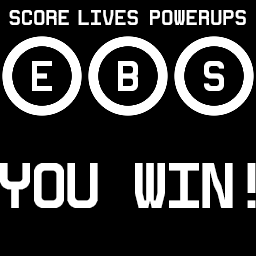
<style>
.page{position:relative;width:256px;height:256px;background:#000000}
.page>*{position:absolute;margin:0}
.t1{font:10px "5Ceta-Mono";letter-spacing:0.1em;color:#ffffff}
.t2{font:20px "5Ceta-Mono";color:#ffffff}
.t3{font:30px "5Ceta-Mono";color:#ffffff}
</style>
<div class="page">
<p class="t1" style="left:9px;top:10px;width:60px;height:15px">SCORE</p>
<p class="t1" style="left:78px;top:10px;width:60px;height:15px">LIVES</p>
<p class="t1" style="left:150px;top:10px;width:96px;height:15px">POWERUPS</p>
<p class="t2" style="left:32px;top:61px;width:20px;height:30px">E</p>
<p class="t2" style="left:118px;top:61px;width:20px;height:30px">B</p>
<p class="t2" style="left:204px;top:61px;width:20px;height:30px">S</p>
<p class="t3" style="left:0px;top:163px;width:256px;height:45px">YOU WIN!</p>
</div>
